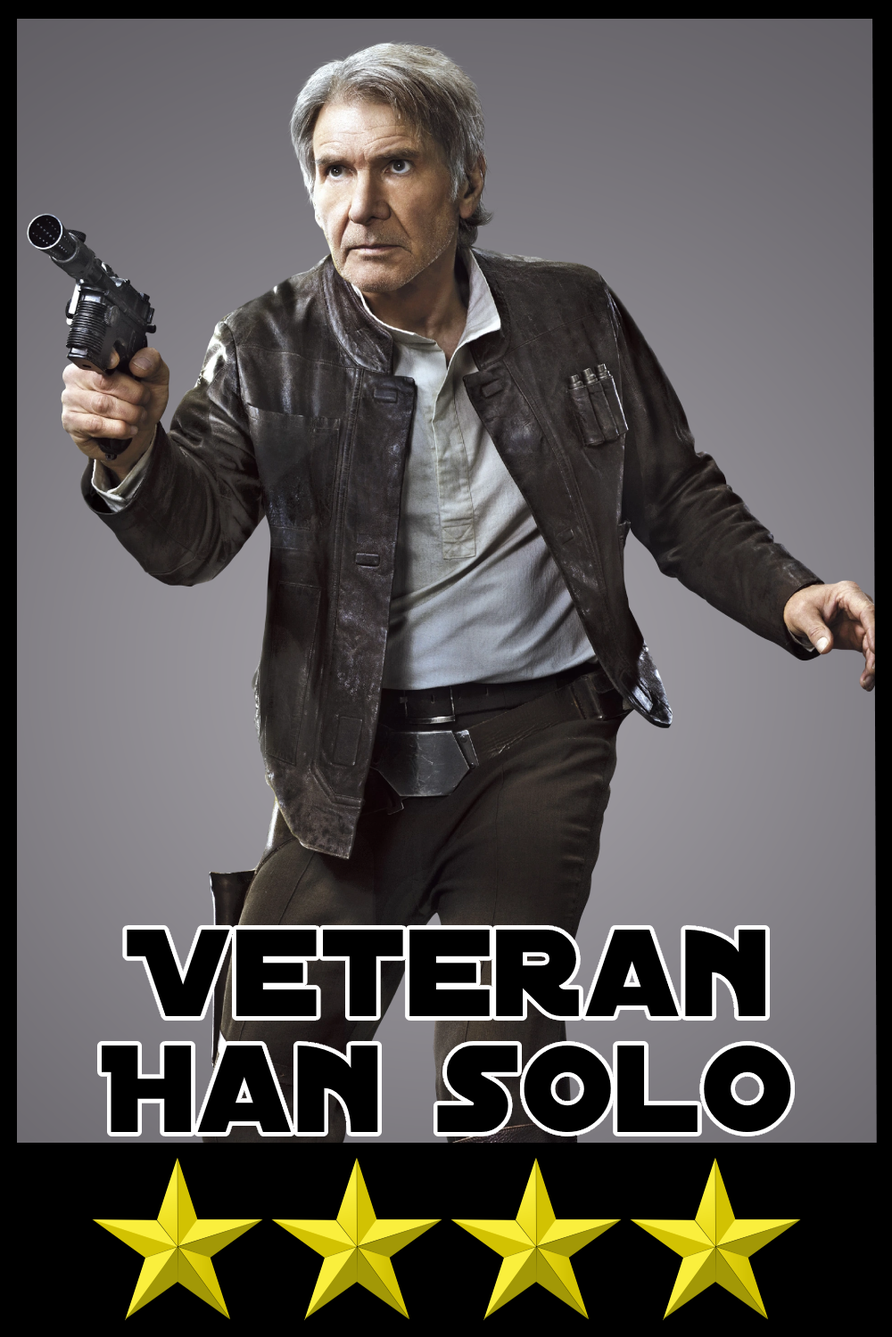
<style>
.page{position:relative;width:892px;height:1337px}
.page>*{position:absolute;margin:0}
.t1{font:133.2px/115.9px "DistantGalaxy";color:#000000}
</style>
<div class="page">
<p class="t1" style="left:101px;top:929px;width:690px;height:204px;text-align:center">Veteran<br>Han solo</p>
</div>
